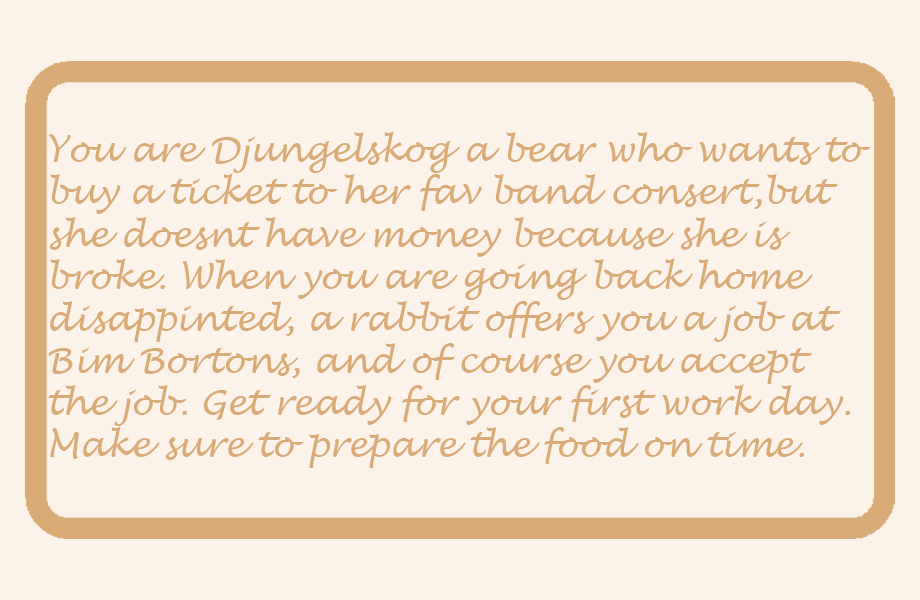
<style>
.page{position:relative;width:920px;height:600px;background:#fbf3ea}
.page>*{position:absolute;margin:0}
.t1{font:35.1px "LucidaHandwriting-Italic";color:#d9ab76}
</style>
<div class="page">
<p class="t1" style="left:48px;top:131px;width:823px;height:337px">You are Djungelskog a bear who wants to<br>buy a ticket to her fav band consert,but <br>she doesnt have money because she is <br>broke. When you are going back home <br>disappinted, a rabbit offers you a job at <br>Bim Bortons, and of course you accept <br>the job. Get ready for your first work day.<br>Make sure to prepare the food on time.</p>
</div>
